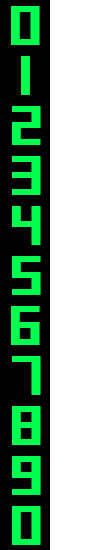
<style>
.page{position:relative;width:100px;height:550px;background:#ffffff}
.page>*{position:absolute;margin:0}
.t1{font:64px "Cone";letter-spacing:0.05em;color:#00ff4e;font-weight:bold;scale:1.25 1}
</style>
<div class="page">
<p class="t1" style="left:11px;top:6px;width:29px;height:39px">0</p>
<p class="t1" style="left:21px;top:56px;width:9px;height:39px">1</p>
<p class="t1" style="left:12px;top:106px;width:29px;height:39px">2</p>
<p class="t1" style="left:12px;top:156px;width:29px;height:39px">3</p>
<p class="t1" style="left:12px;top:206px;width:29px;height:39px">4</p>
<p class="t1" style="left:12px;top:256px;width:29px;height:39px">5</p>
<p class="t1" style="left:11px;top:306px;width:29px;height:39px">6</p>
<p class="t1" style="left:12px;top:356px;width:29px;height:39px">7</p>
<p class="t1" style="left:12px;top:406px;width:29px;height:39px">8</p>
<p class="t1" style="left:12px;top:456px;width:29px;height:39px">9</p>
<p class="t1" style="left:12px;top:506px;width:29px;height:39px">0</p>
</div>
